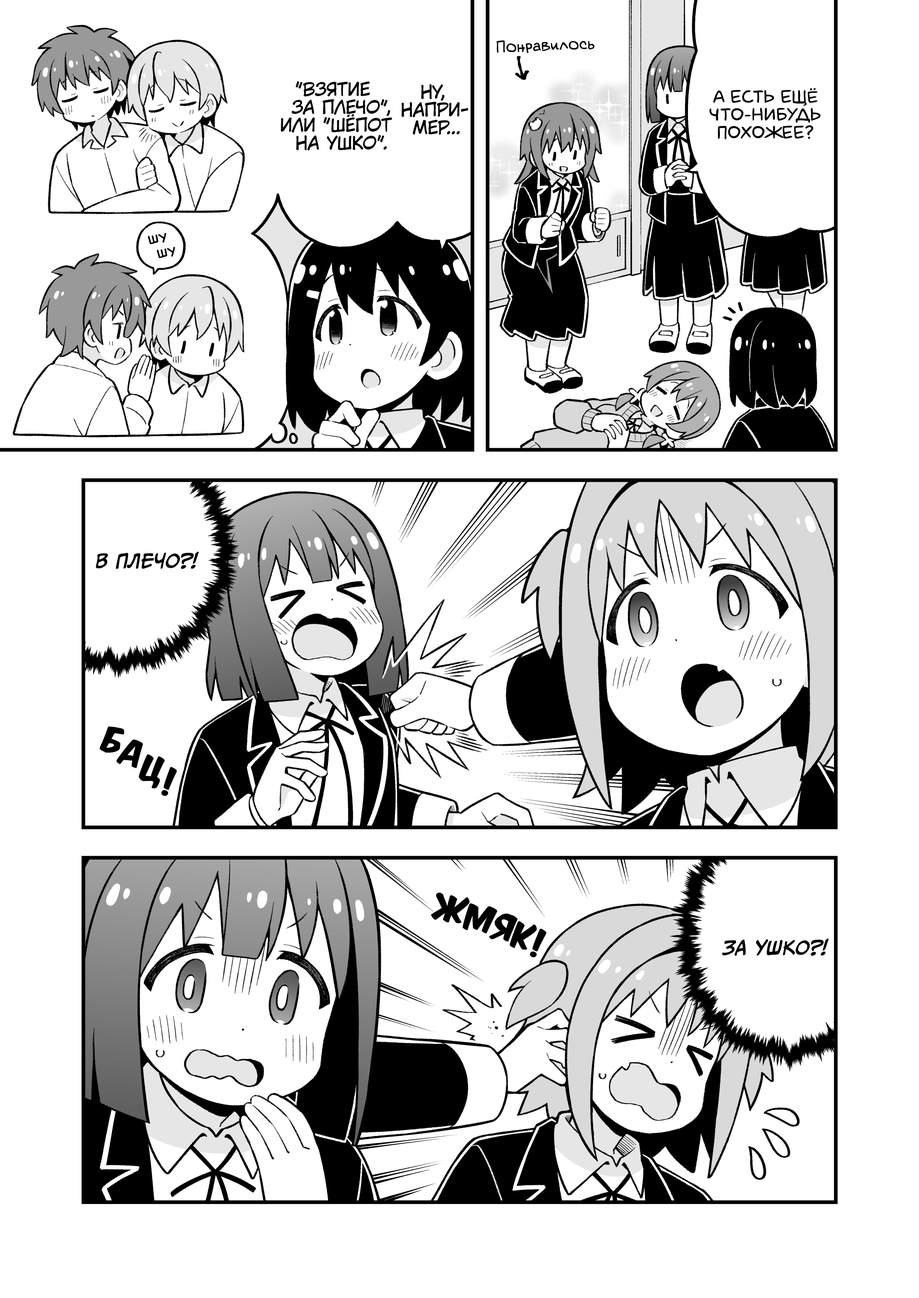
<style>
.page{position:relative;width:919px;height:1298px;background:#ffffff}
.page>*{position:absolute;margin:0}
.t1{font:15.3px "v_Augie";color:#000000;font-weight:bold}
.t2{font:17.9px "KuraiVoice2";color:#000000;text-transform:uppercase}
.t3{font:17.9px "laCartoonerie";color:#000000;text-transform:uppercase}
.t4{font:15.3px "v_BillyTheFlyingRobotBBLC";color:#000000;text-transform:uppercase}
.t5{font:17.9px "CCMeanwhile";color:#000000;text-transform:uppercase;font-weight:bold;font-style:italic}
.t6{font:30.6px "KomikaTitle-AxisRUS-LAT";color:#000000}
</style>
<div class="page">
<p class="t1" style="left:496px;top:40px;width:99px;height:13px;rotate:-2deg">Понравилось</p>
<p class="t2" style="left:281px;top:81px;width:111px;height:70px;text-align:center">"Взятие<br>за плечо",<br>или "шёпот<br>на ушко".</p>
<p class="t2" style="left:401px;top:84px;width:67px;height:51px;text-align:center">Ну,<br>напри-<br>мер...</p>
<p class="t3" style="left:709px;top:88px;width:112px;height:52px;text-align:center">А есть ещё<br>что-нибудь<br>похожее?</p>
<p class="t4" style="left:148px;top:233px;width:27px;height:25px;text-align:center;rotate:-11deg">шу<br>шу</p>
<p class="t5" style="left:96px;top:551px;width:103px;height:18px">В плечо?!</p>
<p class="t6" style="left:100px;top:726px;width:24px;height:27px;rotate:16deg">б</p>
<p class="t6" style="left:116px;top:739px;width:27px;height:29px;rotate:14deg">а</p>
<p class="t6" style="left:139px;top:754px;width:26px;height:34px;rotate:10deg">ц</p>
<p class="t6" style="left:161px;top:767px;width:16px;height:29px;rotate:7deg">!</p>
<p class="t6" style="left:431px;top:892px;width:39px;height:31px;rotate:8deg">ж</p>
<p class="t6" style="left:462px;top:903px;width:35px;height:30px;rotate:10deg">м</p>
<p class="t6" style="left:489px;top:913px;width:29px;height:29px;rotate:9deg">я</p>
<p class="t6" style="left:510px;top:921px;width:27px;height:29px;rotate:12deg">к</p>
<p class="t6" style="left:530px;top:928px;width:16px;height:29px;rotate:10deg">!</p>
<p class="t5" style="left:722px;top:938px;width:107px;height:18px">За ушко?!</p>
</div>
